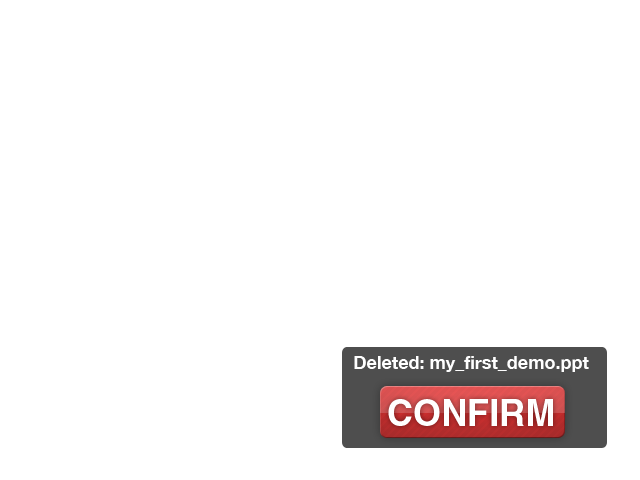
<style>
.page{position:relative;width:640px;height:480px;background:#ffffff}
.page>*{position:absolute;margin:0}
.t1{font:18px "HelveticaNeue-Bold";color:#ffffff}
.t2{font:36px "Helvetica-Bold";color:#ffffff;text-transform:uppercase}
</style>
<div class="page">
<p class="t1" style="left:354px;top:356px;width:235px;height:16px">Deleted: my_first_demo.ppt</p>
<p class="t2" style="left:388px;top:399px;width:165px;height:27px">Confirm</p>
</div>
